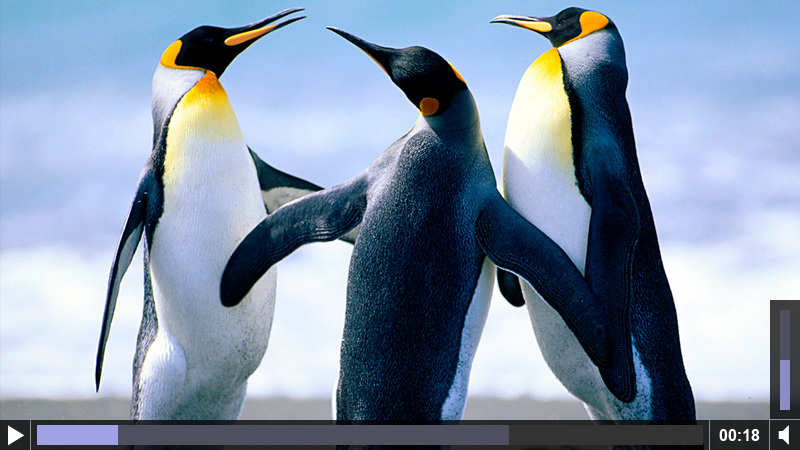
<style>
.page{position:relative;width:800px;height:450px}
.page>*{position:absolute;margin:0}
.t1{font:16px "Arial-BoldMT";color:#ffffff}
</style>
<div class="page">
<p class="t1" style="left:719px;top:429px;width:41px;height:12px">00:18</p>
</div>
